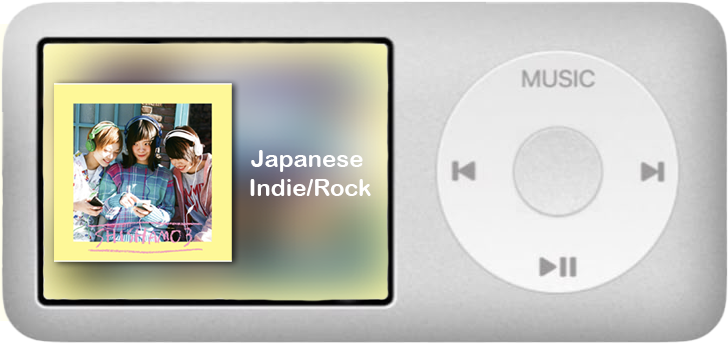
<style>
.page{position:relative;width:728px;height:345px}
.page>*{position:absolute;margin:0}
.t1{font:24px "ArialRoundedMTBold";color:#ffffff}
</style>
<div class="page">
<p class="t1" style="left:250px;top:150px;width:121px;height:46px;text-align:center">Japanese<br> Indie/Rock</p>
</div>
